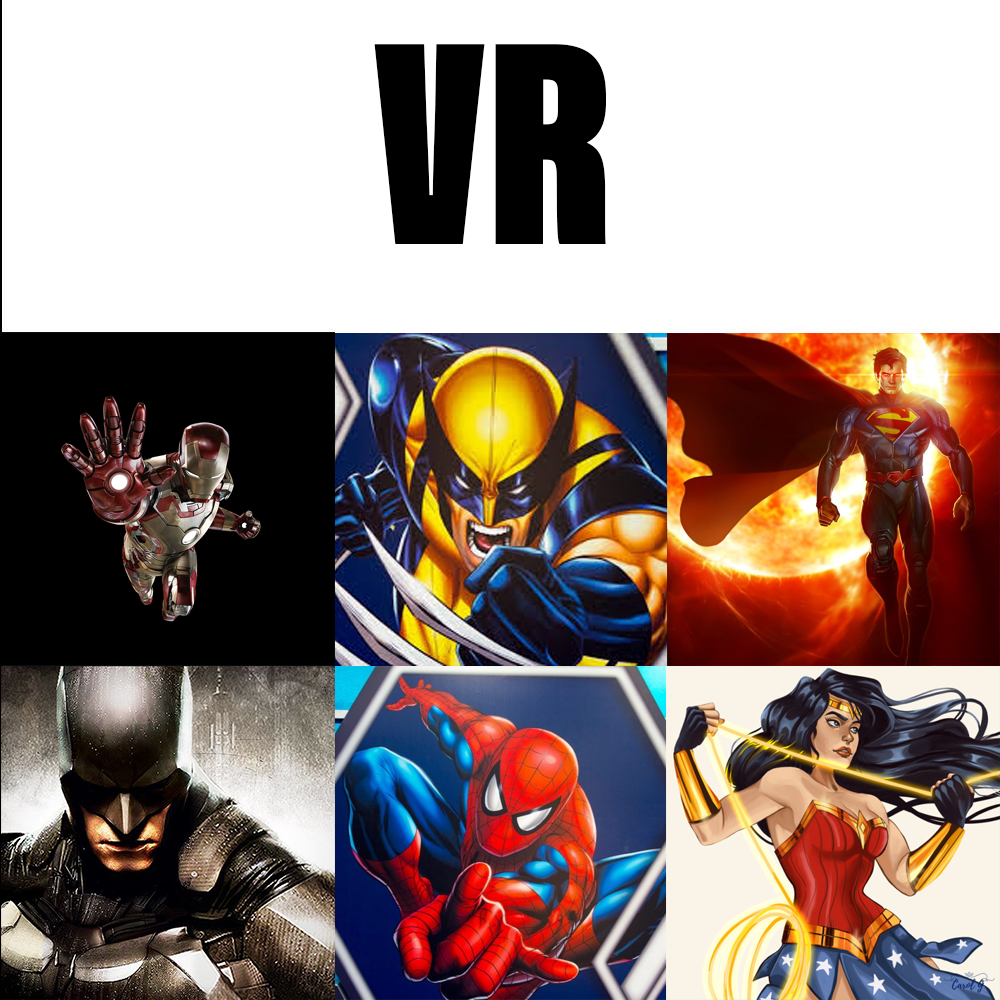
<style>
.page{position:relative;width:1000px;height:1000px;background:#ffffff}
.page>*{position:absolute;margin:0}
.t1{font:300px "AcuminConcept-ExtraCondensedUltraBlack";color:#000000}
</style>
<div class="page">
<p class="t1" style="left:374px;top:44px;width:232px;height:200px">VR</p>
</div>
